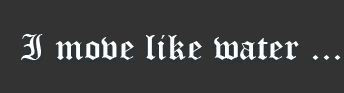
<style>
.page{position:relative;width:344px;height:93px;background:#333333}
.page>*{position:absolute;margin:0}
.t1{font:35px "OldEnglishTextMT";letter-spacing:0.009em;color:#ffffff;scale:1.11 1}
</style>
<div class="page">
<p class="t1" style="left:21px;top:34px;width:320px;height:26px">I move like water ...</p>
</div>
